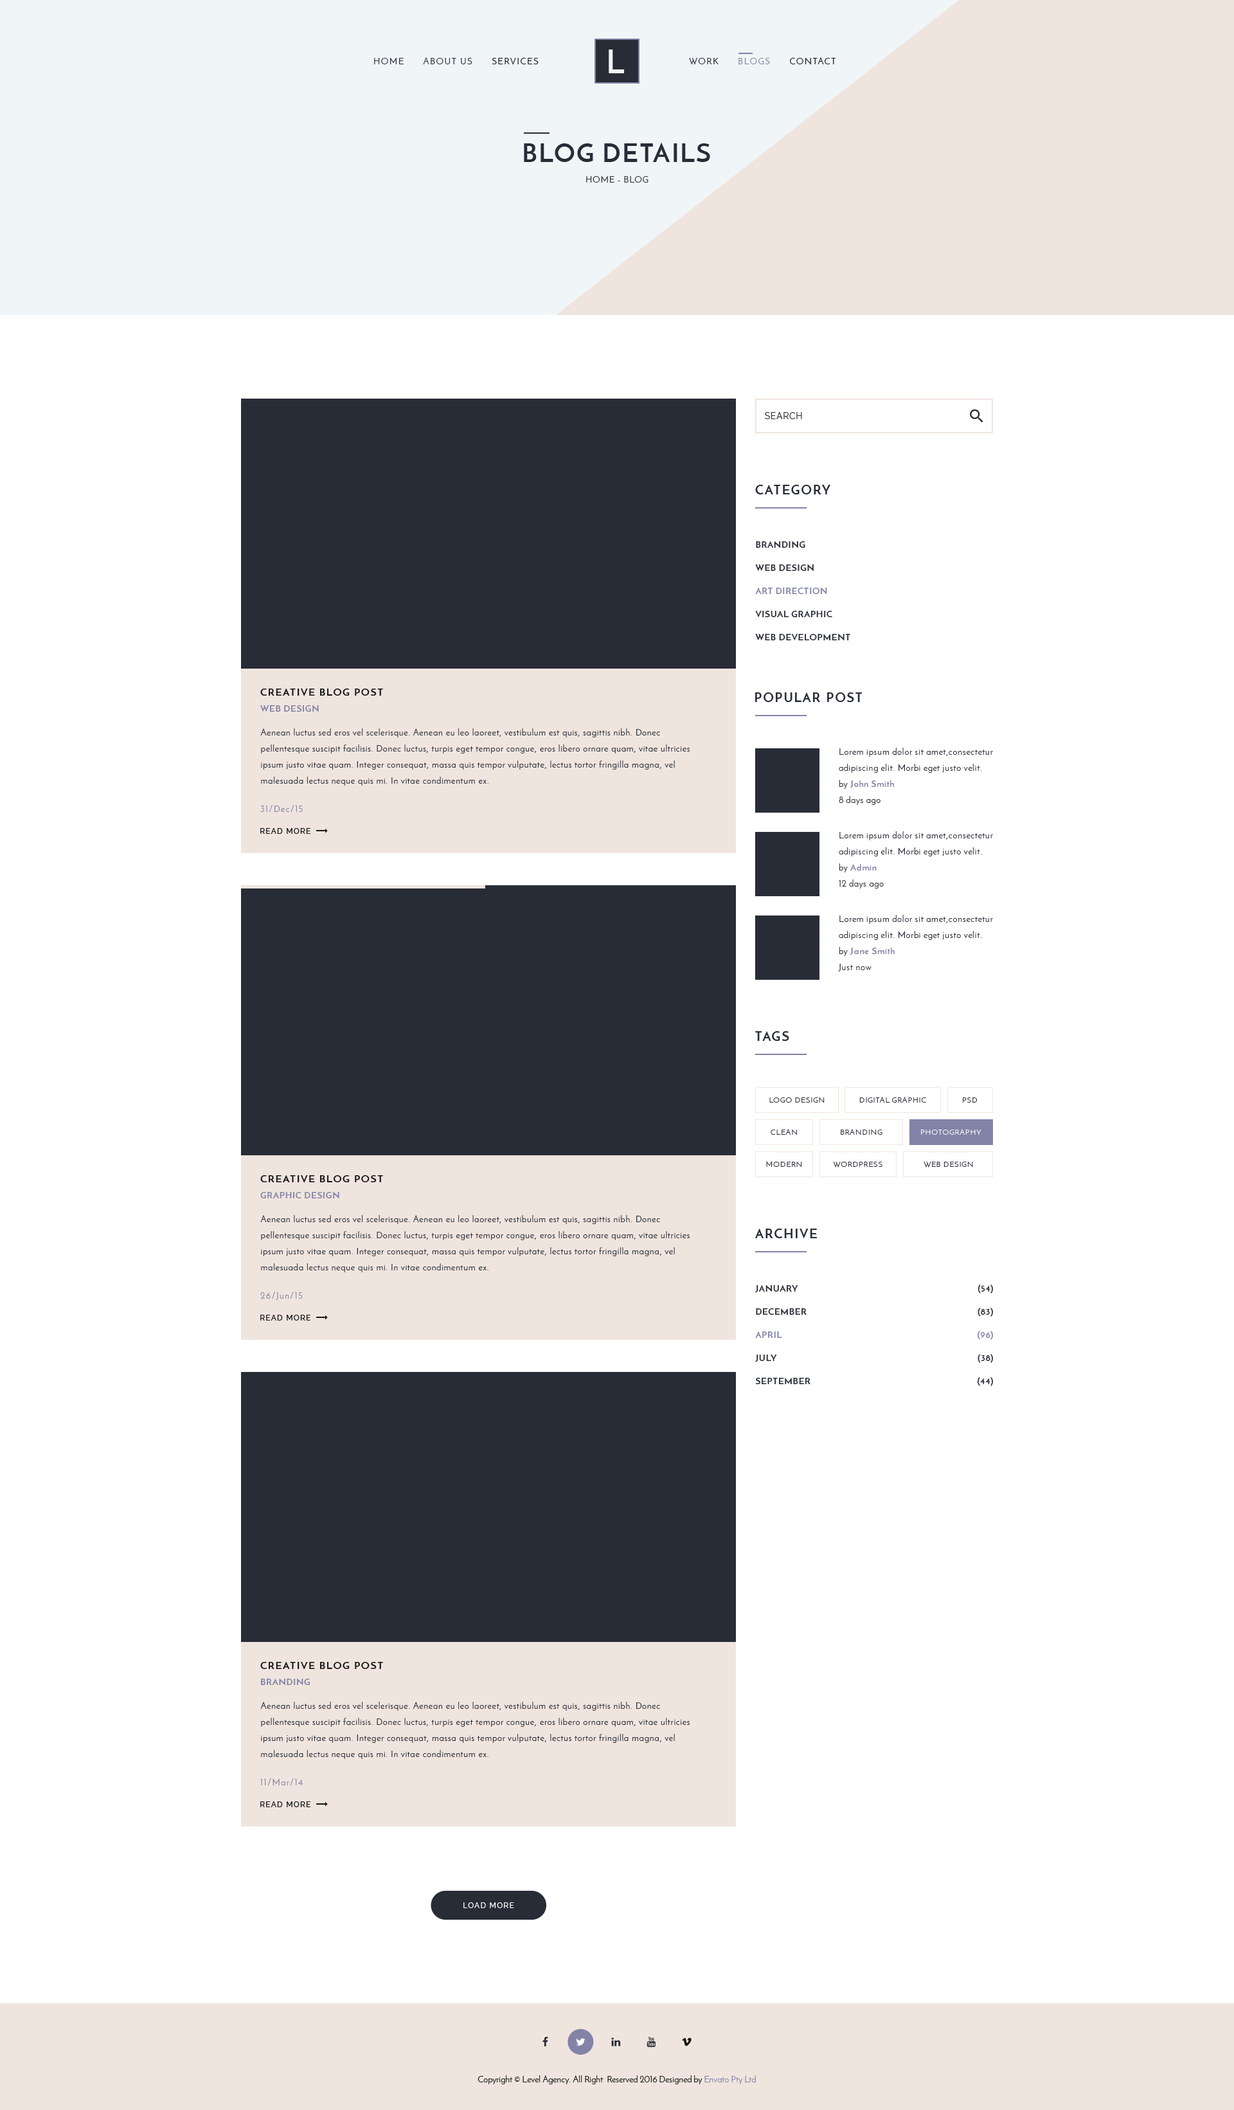
<style>
.page{position:relative;width:1234px;height:2110px;background:#ffffff}
.page>*{position:absolute;margin:0}
.t1{font:32.1px "JosefinSans-Bold";letter-spacing:0.4em;color:#f0f5f7;text-transform:uppercase}
.t2{font:9px "JosefinSans";letter-spacing:0.1em;color:#282c37;text-transform:uppercase}
.t3{font:9px "JosefinSans";letter-spacing:0.1em;color:#141414;text-transform:uppercase}
.t4{font:9px "JosefinSans";letter-spacing:0.1em;color:#8283a7;text-transform:uppercase}
.t5{font:25.7px "JosefinSans-Bold";letter-spacing:0.05em;color:#282c37;text-transform:uppercase}
.t6{font:9px "JosefinSans";letter-spacing:0.05em;color:#282c37;text-transform:uppercase}
.t7{font:9px "Raleway";letter-spacing:0.05em;color:#282c37;text-transform:uppercase}
.t8{font:12.9px "JosefinSans-Bold";letter-spacing:0.1em;color:#282c37;text-transform:uppercase}
.t9{font:9px/23.1px "JosefinSans-Bold";letter-spacing:0.05em;color:#282c37;text-transform:uppercase}
.t10{font:9px/23.1px "JosefinSans-Bold";letter-spacing:0.05em;color:#8283a7;text-transform:uppercase}
.t11{font:10.3px "JosefinSans-Bold";letter-spacing:0.1em;color:#141414;text-transform:uppercase}
.t12{font:9px "JosefinSans-Bold";letter-spacing:0.05em;color:#8283a7;text-transform:uppercase}
.t13{font:9px/16.1px "JosefinSans";letter-spacing:0.05em;color:#282c37}
.t14{font:9px/16.1px "JosefinSans-Bold";letter-spacing:0.05em;color:#8283a7}
.t15{font:9px "JosefinSans";letter-spacing:0.1em;color:#8283a7}
.t16{font:7.7px "Raleway-Medium";letter-spacing:0.1em;color:#141414;text-transform:uppercase}
.t17{font:7.7px "JosefinSans";letter-spacing:0.05em;color:#282c37;text-transform:uppercase}
.t18{font:7.7px "JosefinSans";letter-spacing:0.05em;color:#ffffff;text-transform:uppercase}
.t19{font:7.7px "Raleway-Medium";letter-spacing:0.1em;color:#ffffff;text-transform:uppercase}
.t20{font:9px "JosefinSans";color:#141414}
.t21{font:9px "JosefinSans";color:#8283a7}
</style>
<div class="page">
<p class="t1" style="left:609px;top:50px;width:15px;height:23px">L</p>
<p class="t2" style="left:374px;top:57px;width:165px;height:8px">HOME      ABOUT US<span class="t3">      SERVICES</span></p>
<p class="t3" style="left:689px;top:57px;width:147px;height:8px"><span class="t2">WORK      </span><span class="t4">BLOGS</span>      CONTACT</p>
<p class="t5" style="left:524px;top:142px;width:186px;height:20px">Blog Details</p>
<p class="t6" style="left:586px;top:176px;width:63px;height:7px">Home - Blog</p>
<p class="t7" style="left:765px;top:412px;width:37px;height:7px">Search</p>
<p class="t8" style="left:755px;top:485px;width:76px;height:9px">Category</p>
<p class="t9" style="left:755px;top:541px;width:96px;height:100px">Branding<br>Web Design<br><span class="t10">Art Direction<br></span>Visual Graphic<br>Web Development</p>
<p class="t11" style="left:260px;top:688px;width:123px;height:8px">Creative Blog Post</p>
<p class="t8" style="left:755px;top:692px;width:107px;height:10px">Popular Post</p>
<p class="t12" style="left:260px;top:705px;width:59px;height:7px">Web Design</p>
<p class="t13" style="left:260px;top:728px;width:430px;height:58px">Aenean luctus sed eros vel scelerisque. Aenean eu leo laoreet, vestibulum est quis, sagittis nibh. Donec <br>pellentesque suscipit facilisis. Donec luctus, turpis eget tempor congue, eros libero ornare quam, vitae ultricies ipsum justo vitae quam. Integer consequat, massa quis tempor vulputate, lectus tortor fringilla magna, vel malesuada lectus neque quis mi. In vitae condimentum ex.</p>
<p class="t13" style="left:839px;top:748px;width:154px;height:57px">Lorem ipsum dolor sit amet,consectetur adipiscing elit. Morbi eget justo velit.<br>by <span class="t14">John Smith<br></span>8 days ago</p>
<p class="t15" style="left:260px;top:805px;width:43px;height:7px">31/Dec/15</p>
<p class="t16" style="left:260px;top:828px;width:50px;height:6px">Read more</p>
<p class="t13" style="left:839px;top:831px;width:154px;height:57px">Lorem ipsum dolor sit amet,consectetur adipiscing elit. Morbi eget justo velit.<br>by <span class="t14">Admin<br></span>12 days ago</p>
<p class="t13" style="left:838px;top:915px;width:155px;height:56px">Lorem ipsum dolor sit amet,consectetur adipiscing elit. Morbi eget justo velit.<br>by <span class="t14">Jane Smith<br></span>Just now</p>
<p class="t8" style="left:755px;top:1031px;width:34px;height:10px">Tags</p>
<p class="t17" style="left:770px;top:1097px;width:55px;height:6px">Logo Design</p>
<p class="t17" style="left:860px;top:1097px;width:66px;height:5px">Digital Graphic</p>
<p class="t17" style="left:963px;top:1097px;width:15px;height:5px">PSD</p>
<p class="t17" style="left:771px;top:1129px;width:26px;height:6px">Clean</p>
<p class="t17" style="left:841px;top:1129px;width:42px;height:6px">Branding</p>
<p class="t18" style="left:921px;top:1129px;width:61px;height:6px">Photography</p>
<p class="t17" style="left:766px;top:1161px;width:36px;height:6px">Modern</p>
<p class="t17" style="left:833px;top:1162px;width:50px;height:5px">Wordpress</p>
<p class="t17" style="left:924px;top:1161px;width:49px;height:6px">Web Design</p>
<p class="t11" style="left:260px;top:1174px;width:123px;height:9px">Creative Blog Post</p>
<p class="t12" style="left:260px;top:1191px;width:79px;height:8px">Graphic Design</p>
<p class="t13" style="left:260px;top:1215px;width:430px;height:57px">Aenean luctus sed eros vel scelerisque. Aenean eu leo laoreet, vestibulum est quis, sagittis nibh. Donec <br>pellentesque suscipit facilisis. Donec luctus, turpis eget tempor congue, eros libero ornare quam, vitae ultricies ipsum justo vitae quam. Integer consequat, massa quis tempor vulputate, lectus tortor fringilla magna, vel malesuada lectus neque quis mi. In vitae condimentum ex.</p>
<p class="t8" style="left:755px;top:1228px;width:62px;height:11px">Archive</p>
<p class="t9" style="left:755px;top:1284px;width:56px;height:100px">January<br>December<br><span class="t10">April<br></span>July<br>September</p>
<p class="t9" style="left:978px;top:1284px;width:15px;height:102px;text-align:right">(54)<br>(83)<br><span class="t10">(96)<br></span>(38)<br>(44)</p>
<p class="t15" style="left:260px;top:1292px;width:43px;height:8px">26/Jun/15</p>
<p class="t16" style="left:260px;top:1315px;width:50px;height:5px">Read more</p>
<p class="t11" style="left:260px;top:1661px;width:123px;height:9px">Creative Blog Post</p>
<p class="t12" style="left:261px;top:1678px;width:49px;height:8px">Branding</p>
<p class="t13" style="left:260px;top:1702px;width:430px;height:57px">Aenean luctus sed eros vel scelerisque. Aenean eu leo laoreet, vestibulum est quis, sagittis nibh. Donec <br>pellentesque suscipit facilisis. Donec luctus, turpis eget tempor congue, eros libero ornare quam, vitae ultricies ipsum justo vitae quam. Integer consequat, massa quis tempor vulputate, lectus tortor fringilla magna, vel malesuada lectus neque quis mi. In vitae condimentum ex.</p>
<p class="t15" style="left:260px;top:1778px;width:43px;height:7px">11/Mar/14</p>
<p class="t16" style="left:260px;top:1801px;width:50px;height:6px">Read more</p>
<p class="t19" style="left:464px;top:1902px;width:50px;height:6px">Load more</p>
<p class="t20" style="left:478px;top:2075px;width:278px;height:9px">Copyright © Level Agency. All Right  Reserved 2016 Designed by <span class="t21">Envato Pty Ltd</span></p>
</div>
